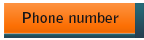
<style>
.page{position:relative;width:144px;height:40px}
.page>*{position:absolute;margin:0}
.t1{font:13.9px "BellGothicStd-Bold";color:#181818;scale:1.15 1}
</style>
<div class="page">
<p class="t1" style="left:23px;top:12px;width:96px;height:11px">Phone number</p>
</div>
